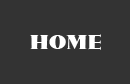
<style>
.page{position:relative;width:130px;height:84px;background:#333333}
.page>*{position:absolute;margin:0}
.t1{font:20px "Vogue";color:#ffffff}
</style>
<div class="page">
<p class="t1" style="left:30px;top:34px;width:71px;height:16px">HOME</p>
</div>
